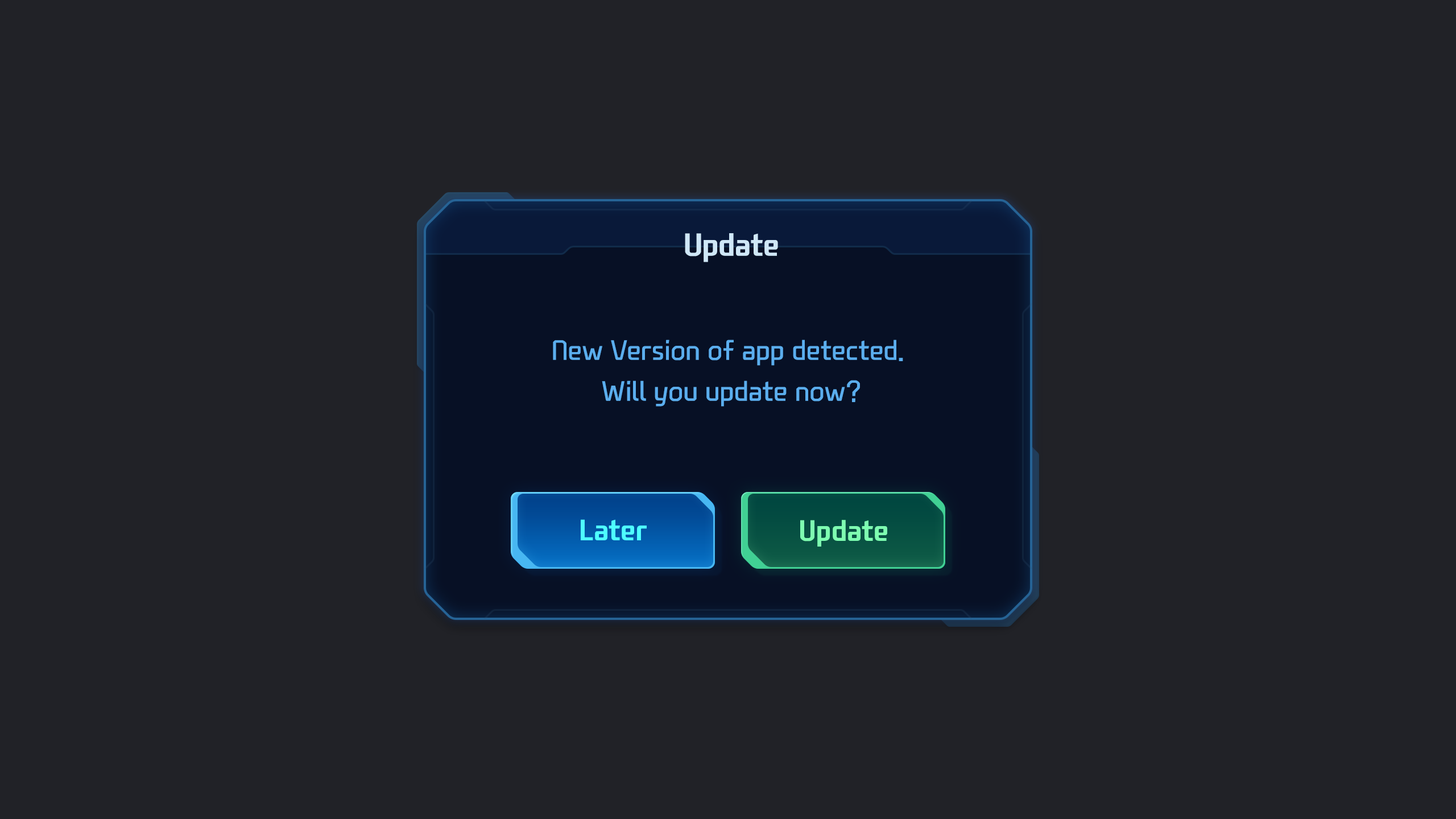
<style>
.page{position:relative;width:1456px;height:819px;background:#212227}
.page>*{position:absolute;margin:0}
.t1{font:30.7px "NEXONFootballGothicB";color:#cfe7f7}
.t2{font:27.3px/40.9px "NEXONFootballGothicL";color:#5baeee}
.t3{font:28.4px "NEXONFootballGothicB";color:#4efefe}
.t4{font:28.4px "NEXONFootballGothicB";color:#7effb1}
</style>
<div class="page">
<p class="t1" style="left:685px;top:233px;width:93px;height:29px">Update</p>
<p class="t2" style="left:553px;top:340px;width:350px;height:67px;text-align:center">New Version of app detected. <br>Will you update now?</p>
<p class="t3" style="left:581px;top:519px;width:66px;height:21px">Later</p>
<p class="t4" style="left:800px;top:520px;width:87px;height:27px">Update</p>
</div>
